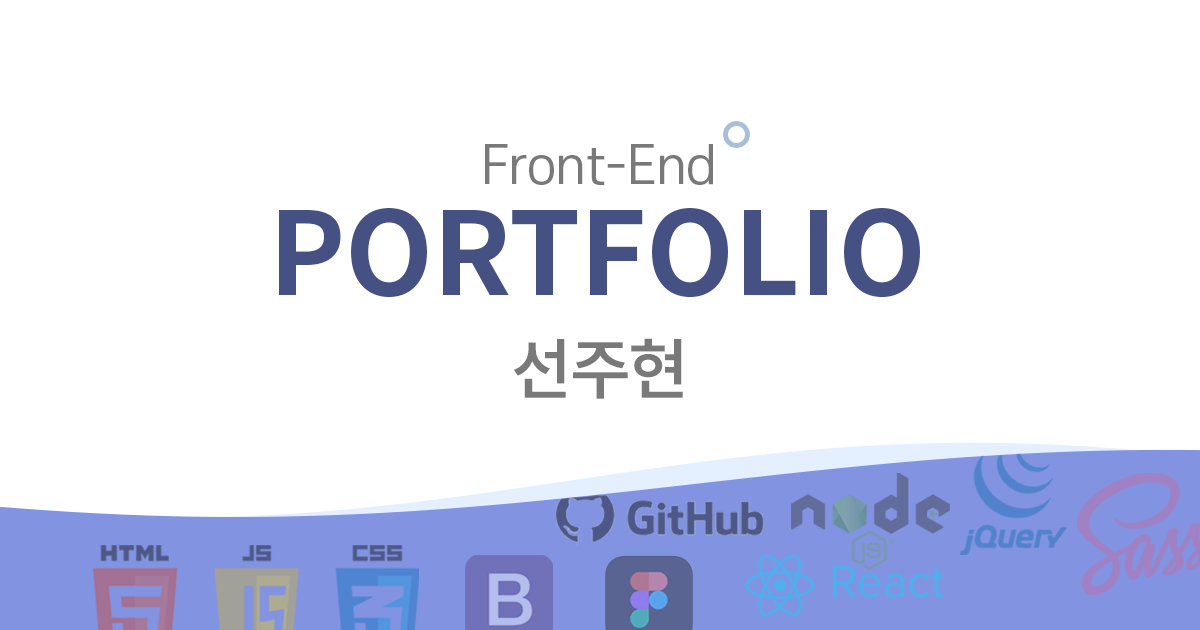
<style>
.page{position:relative;width:1200px;height:630px;background:#ffffff}
.page>*{position:absolute;margin:0}
.t1{font:50.4px "S-CoreDream-4Regular";color:#797979}
.t2{font:114.4px "NotoSansKR-Bold";color:#445182}
.t3{font:68.1px "Pretendard-SemiBold";color:#797979}
</style>
<div class="page">
<p class="t1" style="left:485px;top:144px;width:228px;height:41px">Front-End</p>
<p class="t2" style="left:279px;top:208px;width:641px;height:90px">PORTFOLIO</p>
<p class="t3" style="left:513px;top:338px;width:170px;height:61px">선주현</p>
</div>
